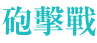
<style>
.page{position:relative;width:97px;height:43px;background:#ffffff}
.page>*{position:absolute;margin:0}
.t1{font:32px "RyuminPro-ExBold";color:#1dbdc0}
</style>
<div class="page">
<p class="t1" style="left:2px;top:6px;width:94px;height:30px">砲擊戰</p>
</div>
